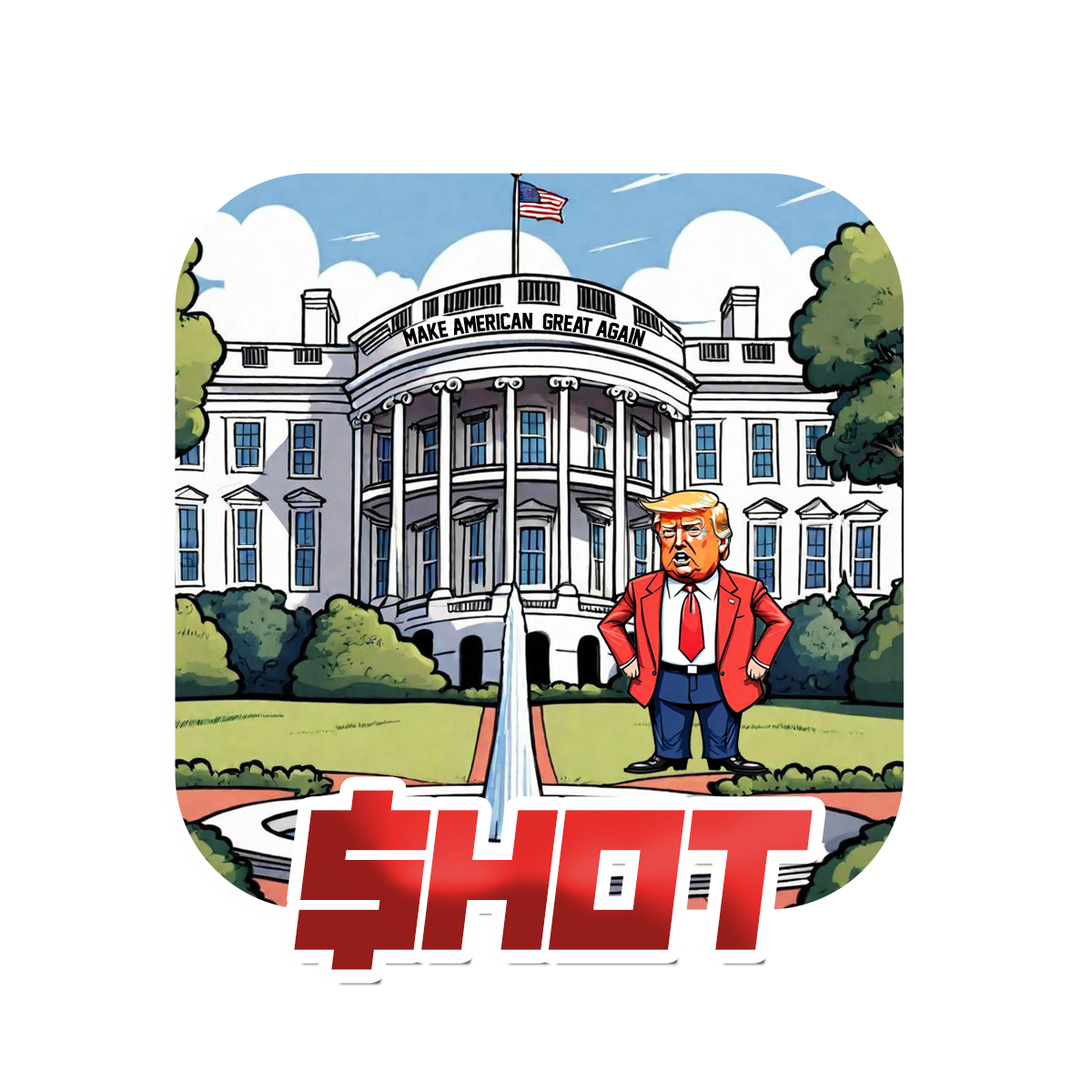
<style>
.page{position:relative;width:1092px;height:1092px;background:#ffffff}
.page>*{position:absolute;margin:0}
.t1{font:20.7px "JerseyM54";letter-spacing:-0.01em;color:#000000;text-transform:uppercase}
.t2{font:203.9px "NauSea";letter-spacing:-0.01em;text-transform:uppercase}
</style>
<div class="page">
<p class="t1" style="left:402px;top:312px;width:244px;height:36px;text-align:center">Make American  great again</p>
<p class="t2" style="left:294px;top:790px;width:519px;height:180px">$HOT</p>
</div>
